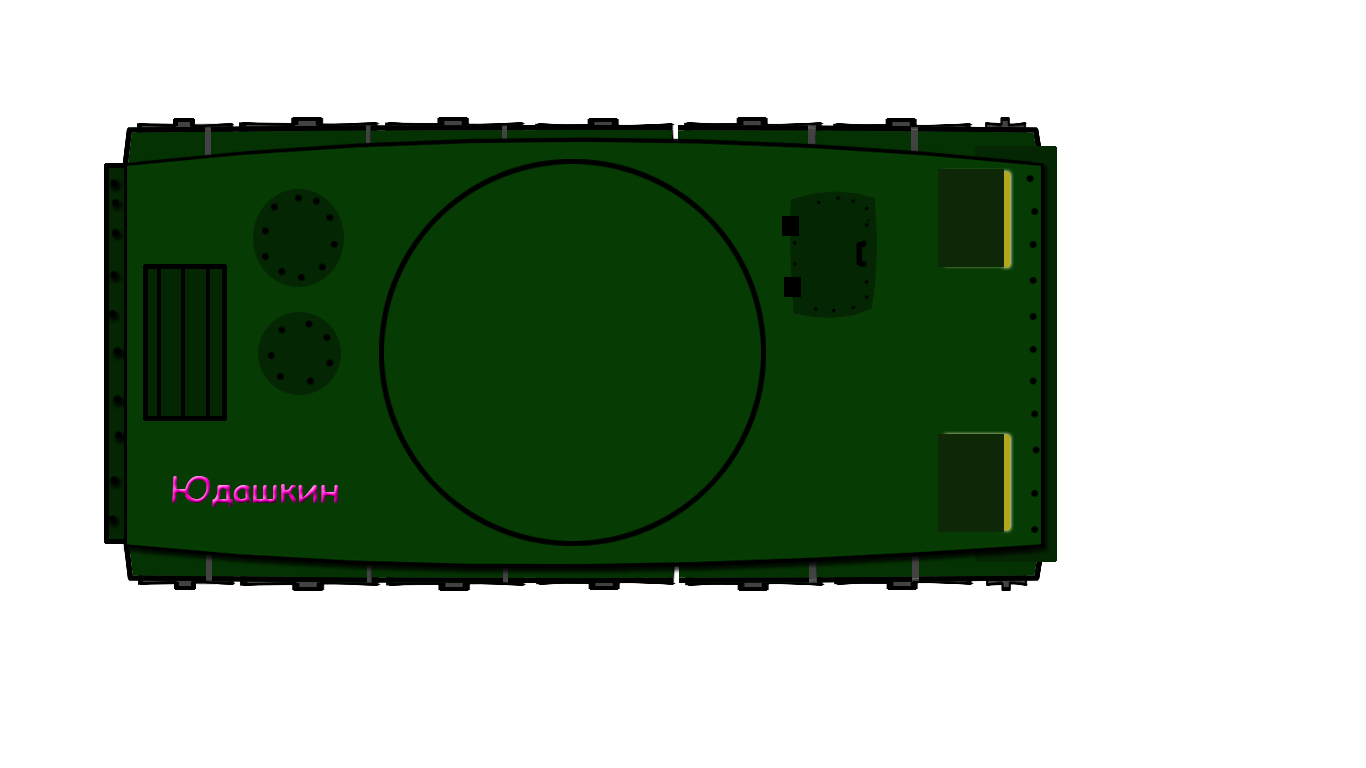
<style>
.page{position:relative;width:1366px;height:768px;background:#ffffff}
.page>*{position:absolute;margin:0}
.t1{font:36px "ComicSansMS"}
</style>
<div class="page">
<p class="t1" style="left:172px;top:476px;width:166px;height:31px">Юдашкин</p>
</div>
